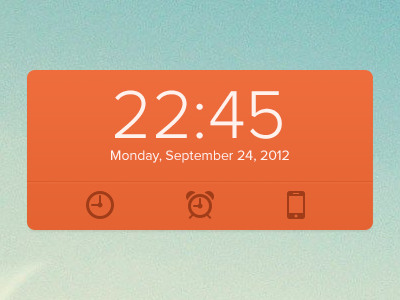
<style>
.page{position:relative;width:400px;height:300px}
.page>*{position:absolute;margin:0}
.t1{font:70px "ProximaNova-Light";color:#fff2ed}
.t2{font:14px "ProximaNova-Regular";color:#fff2ed}
</style>
<div class="page">
<p class="t1" style="left:115px;top:90px;width:167px;height:49px">22:45</p>
<p class="t2" style="left:111px;top:150px;width:178px;height:13px">Monday, September 24, 2012</p>
</div>
